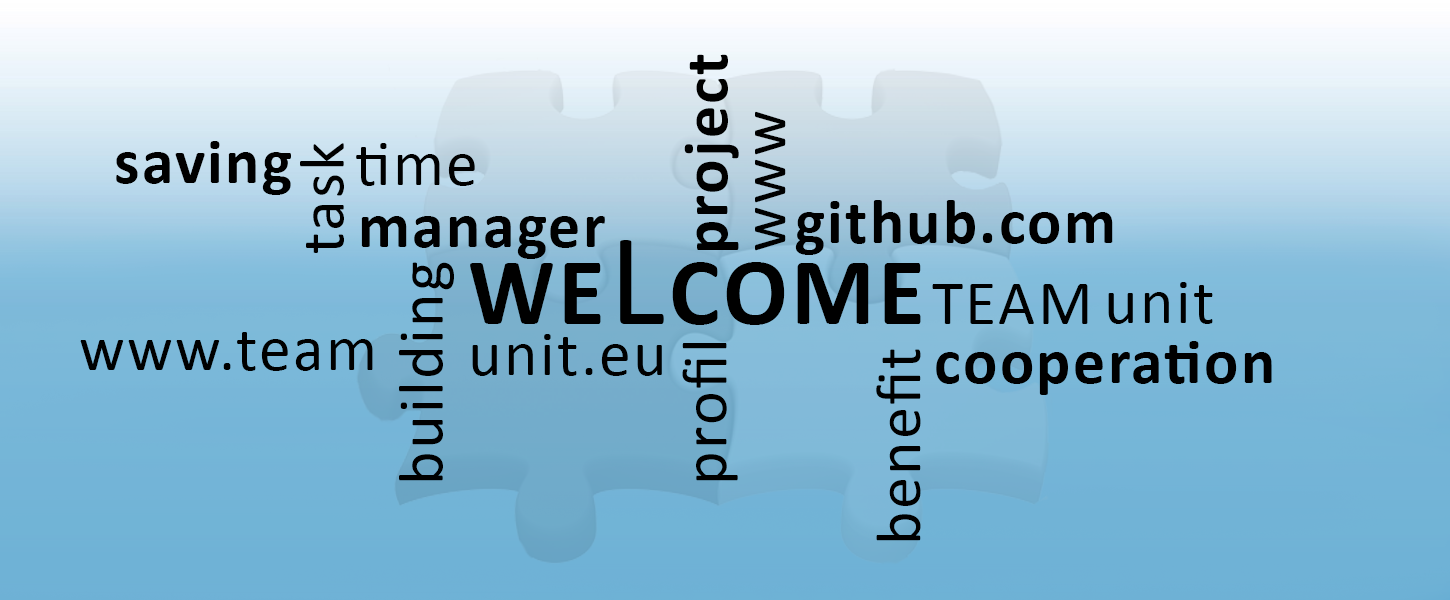
<style>
.page{position:relative;width:1450px;height:600px}
.page>*{position:absolute;margin:0}
.t1{font:64px "Calibri-Bold";letter-spacing:0.035em;color:#000000}
.t2{font:64px "Calibri";letter-spacing:0.035em;color:#000000}
.t3{font:96px "Calibri-Bold";letter-spacing:0.035em;color:#000000}
.t4{font:133.3px "Calibri";letter-spacing:0.035em;color:#000000}
</style>
<div class="page">
<p class="t1" style="left:684px;top:54px;width:55px;height:196px;rotate:-90deg">project</p>
<p class="t2" style="left:755px;top:111px;width:31px;height:140px;rotate:-90deg">www</p>
<p class="t1" style="left:116px;top:141px;width:175px;height:54px">saving</p>
<p class="t2" style="left:300px;top:143px;width:44px;height:110px;rotate:-90deg">task</p>
<p class="t2" style="left:356px;top:143px;width:119px;height:43px">time</p>
<p class="t1" style="left:795px;top:200px;width:318px;height:55px">github.com</p>
<p class="t1" style="left:361px;top:216px;width:244px;height:43px">manager</p>
<p class="t3" style="left:470px;top:240px;width:451px;height:85px">WE<span class="t4">L</span>COME</p>
<p class="t2" style="left:399px;top:262px;width:55px;height:219px;rotate:-90deg">building</p>
<p class="t2" style="left:932px;top:284px;width:156px;height:40px">TEAM</p>
<p class="t2" style="left:1108px;top:282px;width:105px;height:42px">unit</p>
<p class="t2" style="left:80px;top:332px;width:293px;height:39px">www.team</p>
<p class="t2" style="left:472px;top:334px;width:190px;height:42px">unit.eu</p>
<p class="t1" style="left:936px;top:341px;width:336px;height:54px">cooperation</p>
<p class="t2" style="left:682px;top:343px;width:56px;height:138px;rotate:-90deg">profil</p>
<p class="t2" style="left:876px;top:349px;width:45px;height:192px;rotate:-90deg">benefit</p>
</div>
